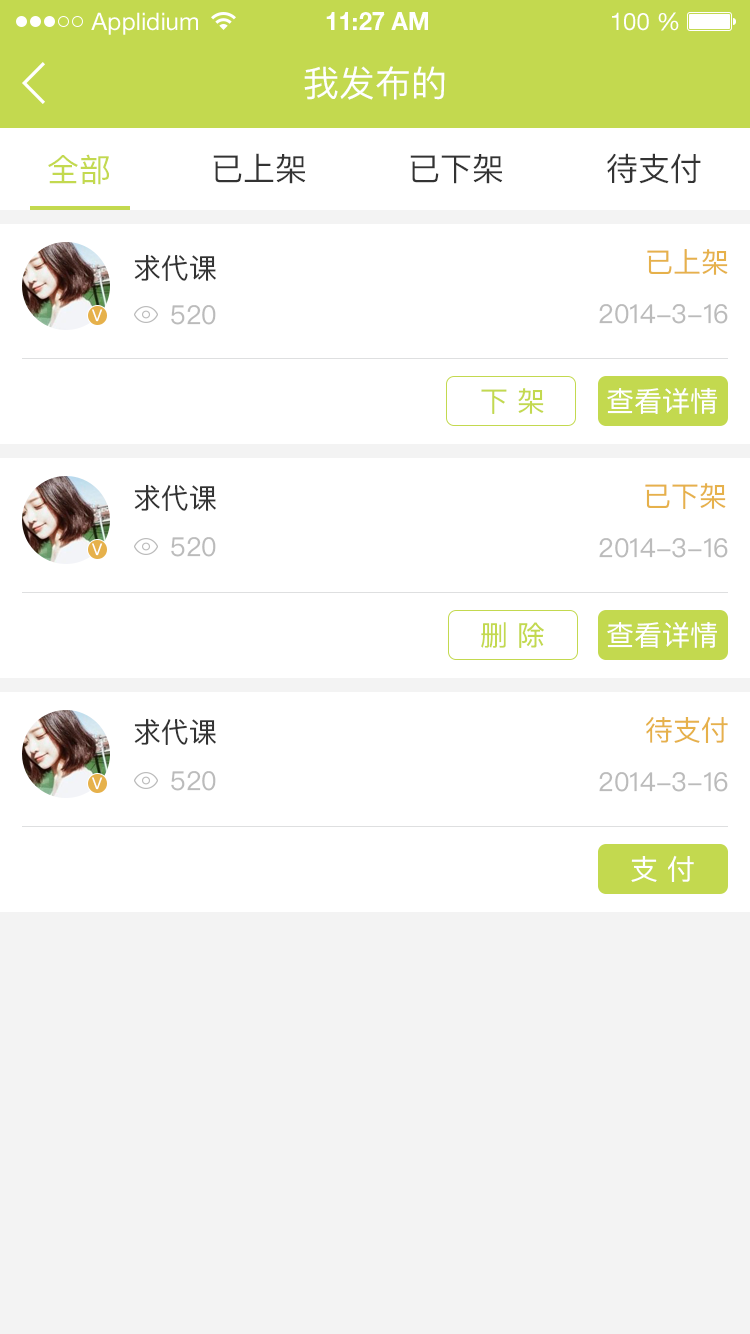
<style>
.page{position:relative;width:750px;height:1334px;background:#ffffff}
.page>*{position:absolute;margin:0}
.t1{font:24px "HelveticaNeueLTStd-Roman";color:#ffffff}
.t2{font:24px "HelveticaNeueLTStd-Bd";color:#ffffff}
.t3{font:36px "PingFangSC-Regular";color:#ffffff}
.t4{font:32px "PingFangSC-Regular";color:#c3d94f}
.t5{font:32px "PingFangSC-Regular";color:#333333}
.t6{font:28px "PingFangSC-Regular";color:#333333}
.t7{font:28px "PingFangSC-Regular";color:#e6b14b}
.t8{font:26px "PingFangSC-Regular";color:#bbbbbb}
.t9{font:15.9px "PingFangSC-Regular";color:#ffffff}
.t10{font:28px "PingFangSC-Regular";color:#c3d94f}
.t11{font:28px "PingFangSC-Regular";color:#ffffff}
</style>
<div class="page">
<p class="t1" style="left:91px;top:12px;width:107px;height:23px">Applidium</p>
<p class="t2" style="left:326px;top:12px;width:102px;height:18px">11:27 AM</p>
<p class="t1" style="left:612px;top:12px;width:67px;height:19px">100 %</p>
<p class="t3" style="left:304px;top:66px;width:141px;height:34px">我发布的</p>
<p class="t4" style="left:48px;top:154px;width:61px;height:31px">全部</p>
<p class="t5" style="left:213px;top:153px;width:93px;height:31px">已上架</p>
<p class="t5" style="left:410px;top:154px;width:93px;height:30px">已下架</p>
<p class="t5" style="left:607px;top:153px;width:94px;height:31px">待支付</p>
<p class="t6" style="left:134px;top:254px;width:82px;height:27px">求代课</p>
<p class="t7" style="left:647px;top:249px;width:81px;height:26px">已上架</p>
<p class="t8" style="left:171px;top:305px;width:45px;height:20px">520</p>
<p class="t8" style="left:599px;top:304px;width:129px;height:20px">2014-3-16</p>
<p class="t9" style="left:92px;top:309px;width:11px;height:13px">V</p>
<p class="t10" style="left:481px;top:388px;width:63px;height:26px">下 架</p>
<p class="t11" style="left:607px;top:388px;width:110px;height:26px">查看详情</p>
<p class="t6" style="left:134px;top:484px;width:82px;height:27px">求代课</p>
<p class="t7" style="left:645px;top:483px;width:81px;height:26px">已下架</p>
<p class="t9" style="left:92px;top:543px;width:11px;height:13px">V</p>
<p class="t8" style="left:171px;top:537px;width:45px;height:20px">520</p>
<p class="t8" style="left:599px;top:538px;width:129px;height:20px">2014-3-16</p>
<p class="t10" style="left:481px;top:622px;width:63px;height:26px">删 除</p>
<p class="t11" style="left:607px;top:622px;width:110px;height:26px">查看详情</p>
<p class="t6" style="left:134px;top:718px;width:82px;height:27px">求代课</p>
<p class="t7" style="left:646px;top:716px;width:82px;height:27px">待支付</p>
<p class="t8" style="left:171px;top:771px;width:45px;height:20px">520</p>
<p class="t8" style="left:599px;top:772px;width:129px;height:20px">2014-3-16</p>
<p class="t9" style="left:92px;top:777px;width:11px;height:13px">V</p>
<p class="t11" style="left:631px;top:855px;width:63px;height:27px">支 付</p>
</div>
